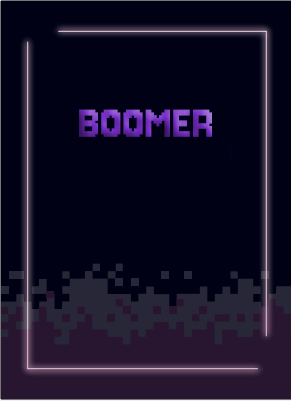
<style>
.page{position:relative;width:291px;height:401px;background:#000115}
.page>*{position:absolute;margin:0}
.t1{font:50px "Jersey10-Regular";letter-spacing:0.025em}
</style>
<div class="page">
<p class="t1" style="left:79px;top:109px;width:133px;height:28px">BOOMER</p>
</div>
